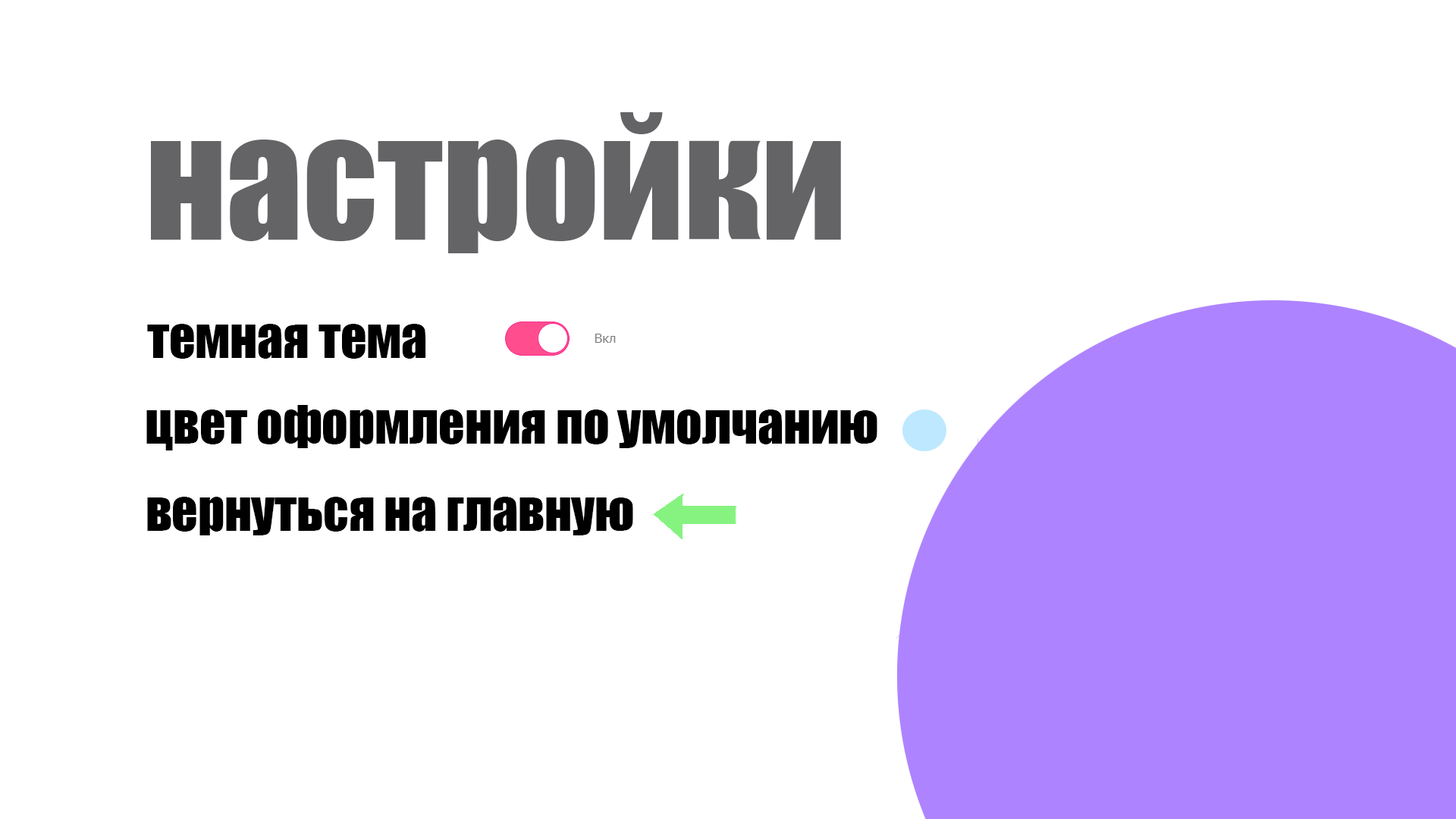
<style>
.page{position:relative;width:1456px;height:819px;background:#ffffff}
.page>*{position:absolute;margin:0}
.t1{font:151.7px "Impact";color:#646366}
.t2{font:51.2px "Impact";color:#000000}
</style>
<div class="page">
<p class="t1" style="left:151px;top:112px;width:690px;height:141px">настройки</p>
<p class="t2" style="left:147px;top:324px;width:279px;height:35px">темная тема</p>
<p class="t2" style="left:146px;top:405px;width:731px;height:45px">цвет оформления по умолчанию</p>
<p class="t2" style="left:147px;top:497px;width:486px;height:38px">вернуться на главную</p>
</div>
